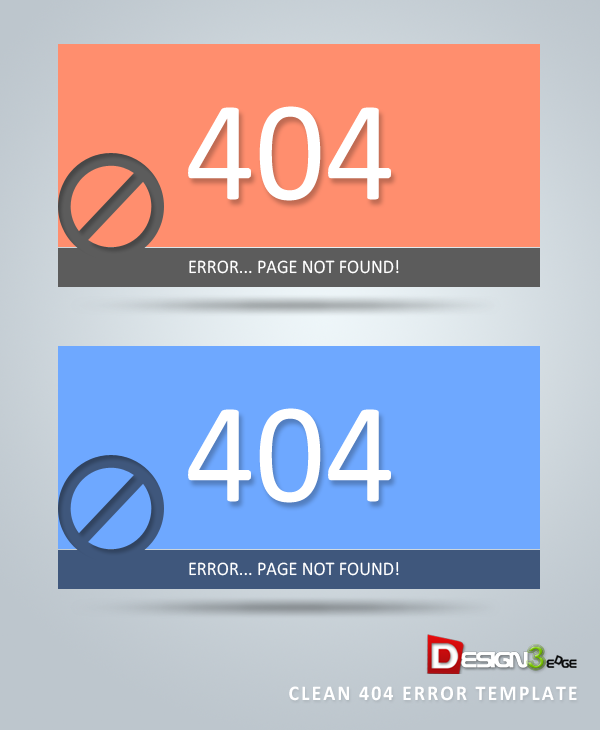
<style>
.page{position:relative;width:600px;height:730px}
.page>*{position:absolute;margin:0}
.t1{font:144.4px "Calibri";color:#ffffff;scale:0.95 1}
.t2{font:19.2px "Calibri";color:#ffffff;text-transform:uppercase;scale:0.95 1}
.t3{font:21px "Calibri-Bold";letter-spacing:0.1em;color:#ffffff;text-transform:uppercase;scale:0.95 1}
</style>
<div class="page">
<p class="t1" style="left:188px;top:106px;width:203px;height:95px">404</p>
<p class="t2" style="left:189px;top:260px;width:210px;height:14px">Error... Page not found!</p>
<p class="t1" style="left:188px;top:408px;width:203px;height:95px">404</p>
<p class="t2" style="left:189px;top:562px;width:210px;height:14px">Error... Page not found!</p>
<p class="t3" style="left:289px;top:686px;width:288px;height:15px">Clean 404 Error Template</p>
</div>
